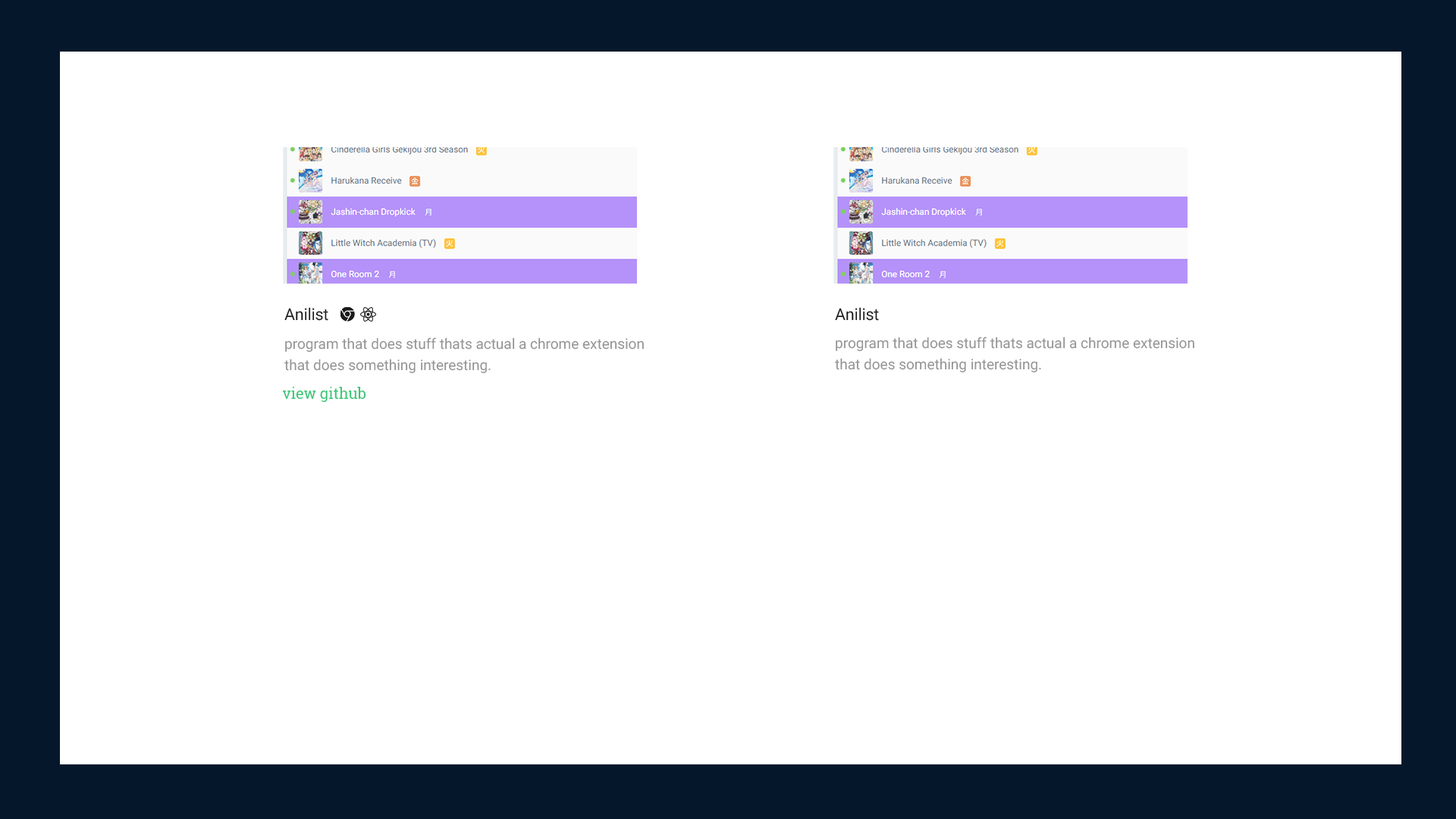
<style>
.page{position:relative;width:1456px;height:819px;background:#ffffff}
.page>*{position:absolute;margin:0}
.t1{font:16.2px "Roboto-Regular";letter-spacing:-0.01em;color:#1b1b1b}
.t2{font:14.4px/21.2px "Roboto-Regular";color:#949494}
.t3{font:15px "RobotoSlab-Regular";color:#39c675}
</style>
<div class="page">
<p class="t1" style="left:284px;top:307px;width:44px;height:14px">Anilist</p>
<p class="t1" style="left:835px;top:307px;width:44px;height:14px">Anilist</p>
<p class="t2" style="left:284px;top:337px;width:360px;height:37px">program that does stuff thats actual a chrome extension<br>that does something interesting.</p>
<p class="t2" style="left:835px;top:337px;width:359px;height:36px">program that does stuff thats actual a chrome extension<br>that does something interesting.</p>
<p class="t3" style="left:282px;top:387px;width:84px;height:15px">view github</p>
</div>
